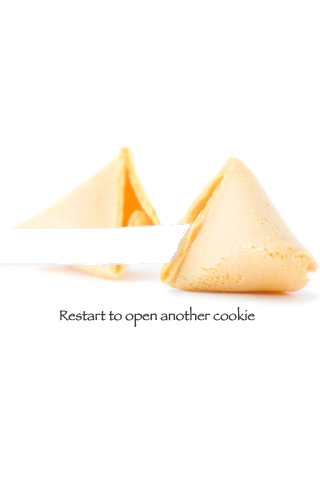
<style>
.page{position:relative;width:320px;height:480px;background:#ffffff}
.page>*{position:absolute;margin:0}
.t1{font:14px "Papyrus";color:#333333}
</style>
<div class="page">
<p class="t1" style="left:60px;top:306px;width:195px;height:21px">Restart to open another cookie</p>
</div>
